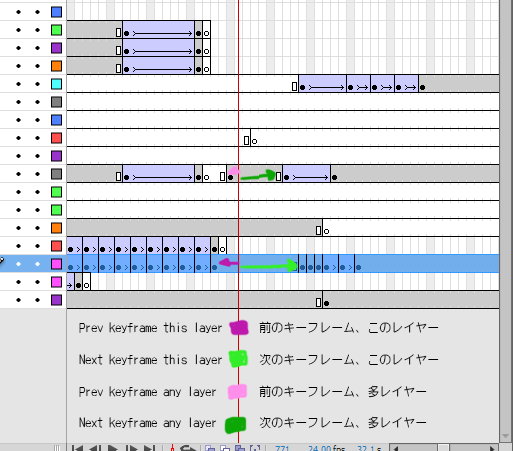
<style>
.page{position:relative;width:513px;height:451px;background:#ffffff}
.page>*{position:absolute;margin:0}
.t1{font:12px "ARADGothicJP-Medium";color:#000000}
</style>
<div class="page">
<p class="t1" style="left:79px;top:321px;width:360px;height:108px">Prev keyframe this layer 前のキーフレーム、このレイヤー<br><br>Next keyframe this layer 次のキーフレーム、このレイヤー<br><br>Prev keyframe any layer  前のキーフレーム、多レイヤー<br><br>Next keyframe any layer  次のキーフレーム、多レイヤー</p>
</div>
